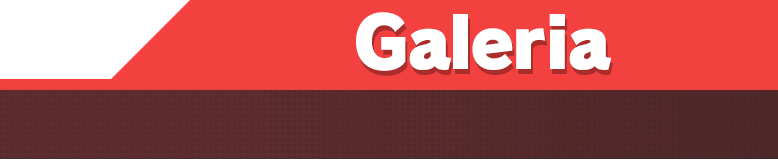
<style>
.page{position:relative;width:778px;height:160px;background:#f3413f}
.page>*{position:absolute;margin:0}
.t1{font:70.7px "RodinPro-UB";letter-spacing:-0.036em;color:#ffffff}
</style>
<div class="page">
<p class="t1" style="left:356px;top:12px;width:256px;height:59px">Galeria</p>
</div>
